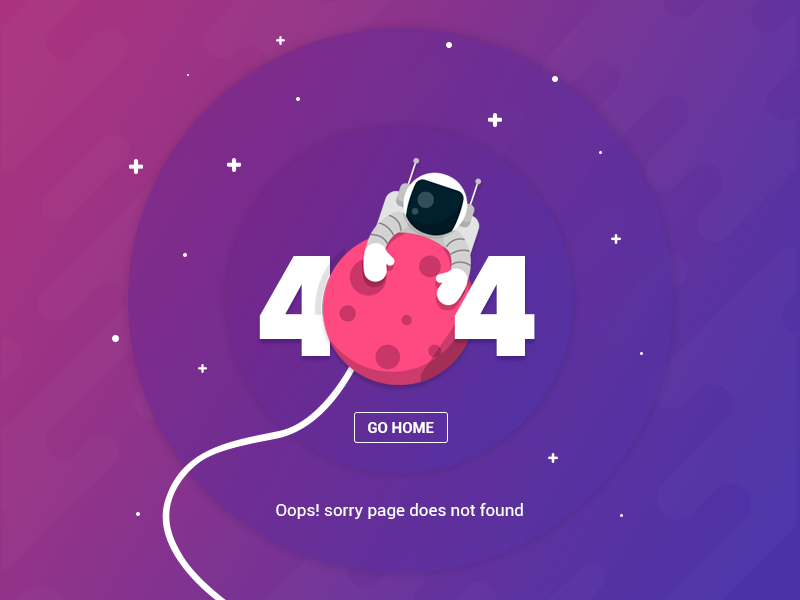
<style>
.page{position:relative;width:800px;height:600px}
.page>*{position:absolute;margin:0}
.t1{font:150px "ProximaNovaCond-Black";color:#ffffff}
.t2{font:15px "Roboto-Bold";color:#ffffff}
.t3{font:17px "Roboto-Regular";color:#ffffff}
</style>
<div class="page">
<p class="t1" style="left:259px;top:256px;width:81px;height:100px">4</p>
<p class="t1" style="left:454px;top:256px;width:81px;height:100px">4</p>
<p class="t2" style="left:368px;top:422px;width:66px;height:11px">GO HOME</p>
<p class="t3" style="left:276px;top:503px;width:247px;height:16px">Oops! sorry page does not found</p>
</div>
